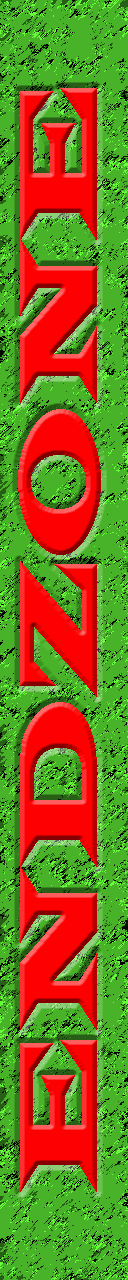
<style>
.page{position:relative;width:128px;height:1280px;background:#48b328}
.page>*{position:absolute;margin:0}
.t1{font:115px "LatinWide";color:#fd0001}
</style>
<div class="page">
<p class="t1" style="left:18px;top:88px;width:83px;height:1104px;rotate:-90deg">ENDZONE</p>
</div>
